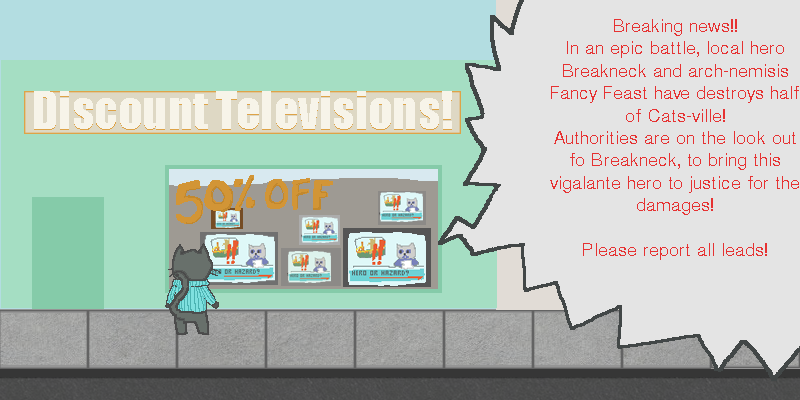
<style>
.page{position:relative;width:800px;height:400px;background:#e4e4e4}
.page>*{position:absolute;margin:0}
.t1{font:18.7px "LaoSangamMN";color:#e63232}
.t2{font:48px "Impact";color:#f7f4e9}
</style>
<div class="page">
<p class="t1" style="left:550px;top:19px;width:249px;height:241px;text-align:center">Breaking news!!<br>In an epic battle, local hero Breakneck and arch-nemisis Fancy Feast have destroys half of Cats-ville!<br>Authorities are on the look out fo Breakneck, to bring this vigalante hero to justice for the damages!<br><br>Please report all leads!</p>
<p class="t2" style="left:34px;top:92px;width:418px;height:38px">Discount Televisions!</p>
<p class="t2" style="left:34px;top:91px;width:418px;height:38px">Discount Televisions!</p>
</div>
